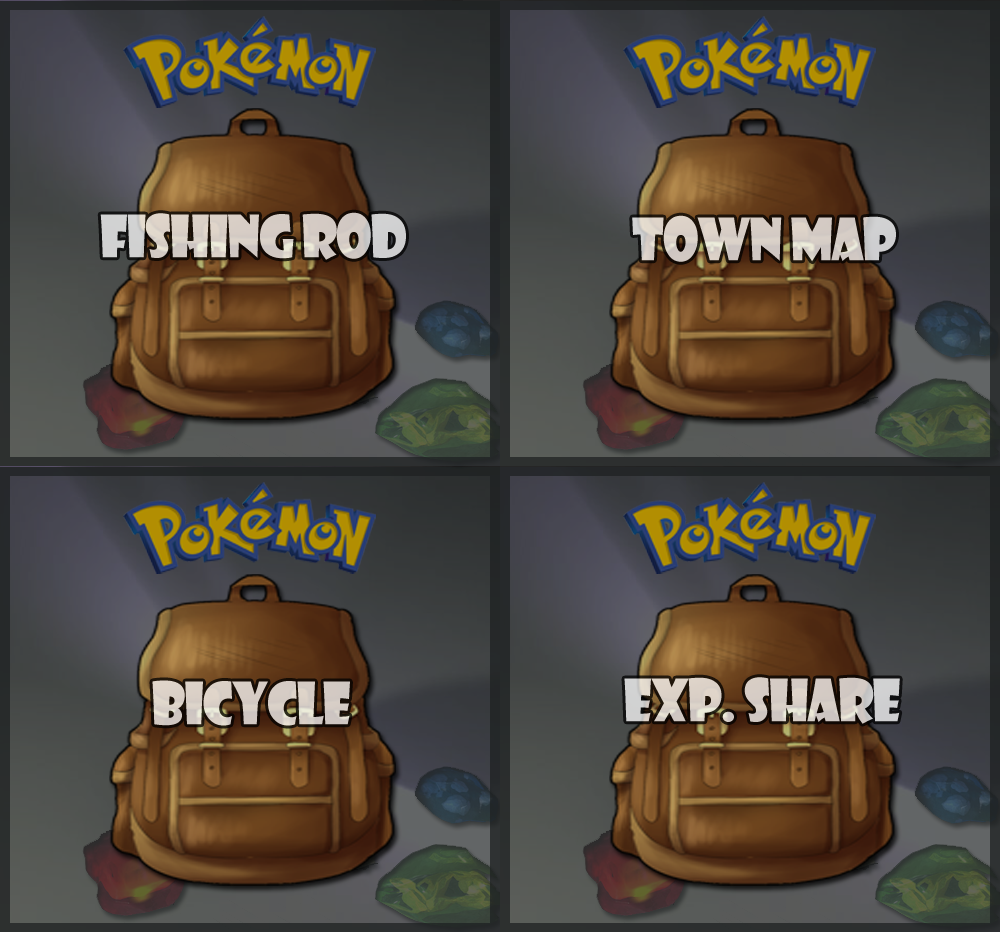
<style>
.page{position:relative;width:1000px;height:932px}
.page>*{position:absolute;margin:0}
.t1{font:56.9px "ShowcardGothic-Reg";letter-spacing:-0.025em;color:#d4cec7;scale:0.91 1}
.t2{font:56.9px "ShowcardGothic-Reg";letter-spacing:-0.025em;color:#d5cdc6;scale:0.91 1}
.t3{font:56.9px "ShowcardGothic-Reg";letter-spacing:-0.025em;color:#d6cdc5;scale:0.91 1}
</style>
<div class="page">
<p class="t1" style="left:100px;top:212px;width:306px;height:48px">Fishing Rod</p>
<p class="t2" style="left:632px;top:215px;width:264px;height:47px">Town Map</p>
<p class="t1" style="left:624px;top:677px;width:276px;height:47px">Exp. Share</p>
<p class="t3" style="left:152px;top:680px;width:198px;height:46px">Bicycle</p>
</div>
